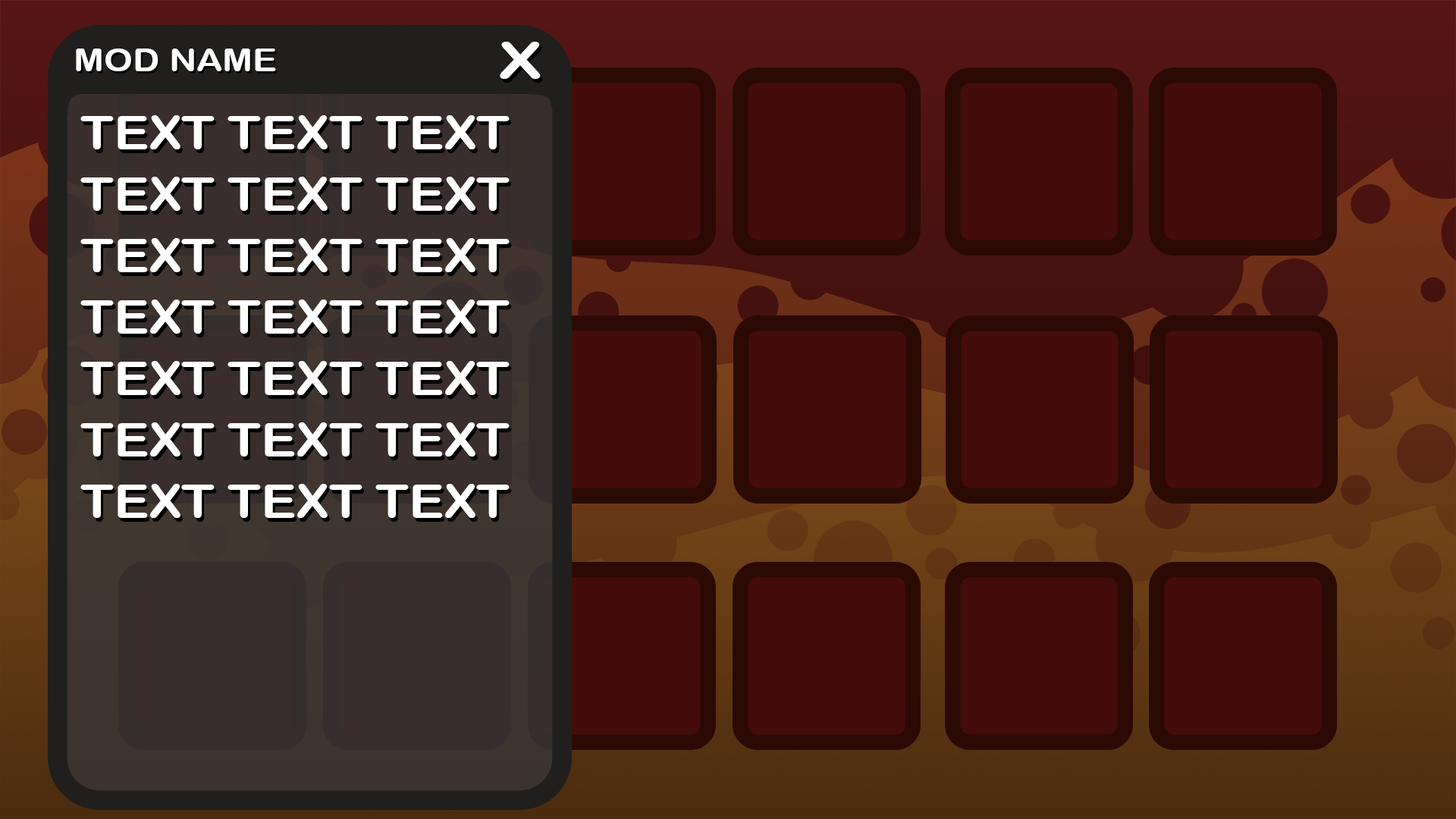
<style>
.page{position:relative;width:1456px;height:819px;background:#440d0a}
.page>*{position:absolute;margin:0}
.t1{font:50.2px "ArialRoundedMTBold";color:#ffffff;text-transform:uppercase;scale:1.4 1}
.t2{font:32.2px "ArialRoundedMTBold";color:#ffffff;text-transform:uppercase;scale:1.13 1}
.t3{font:47.1px "ArialRoundedMTBold";color:#ffffff;text-transform:uppercase;scale:1.13 1}
</style>
<div class="page">
<p class="t1" style="left:500px;top:42px;width:41px;height:37px">x</p>
<p class="t2" style="left:76px;top:49px;width:200px;height:22px">mod name</p>
<p class="t3" style="left:80px;top:115px;width:430px;height:403px;text-align:center">text text text <br>text text text <br>text text text <br>text text text <br>text text text <br>text text text <br>text text text</p>
</div>
